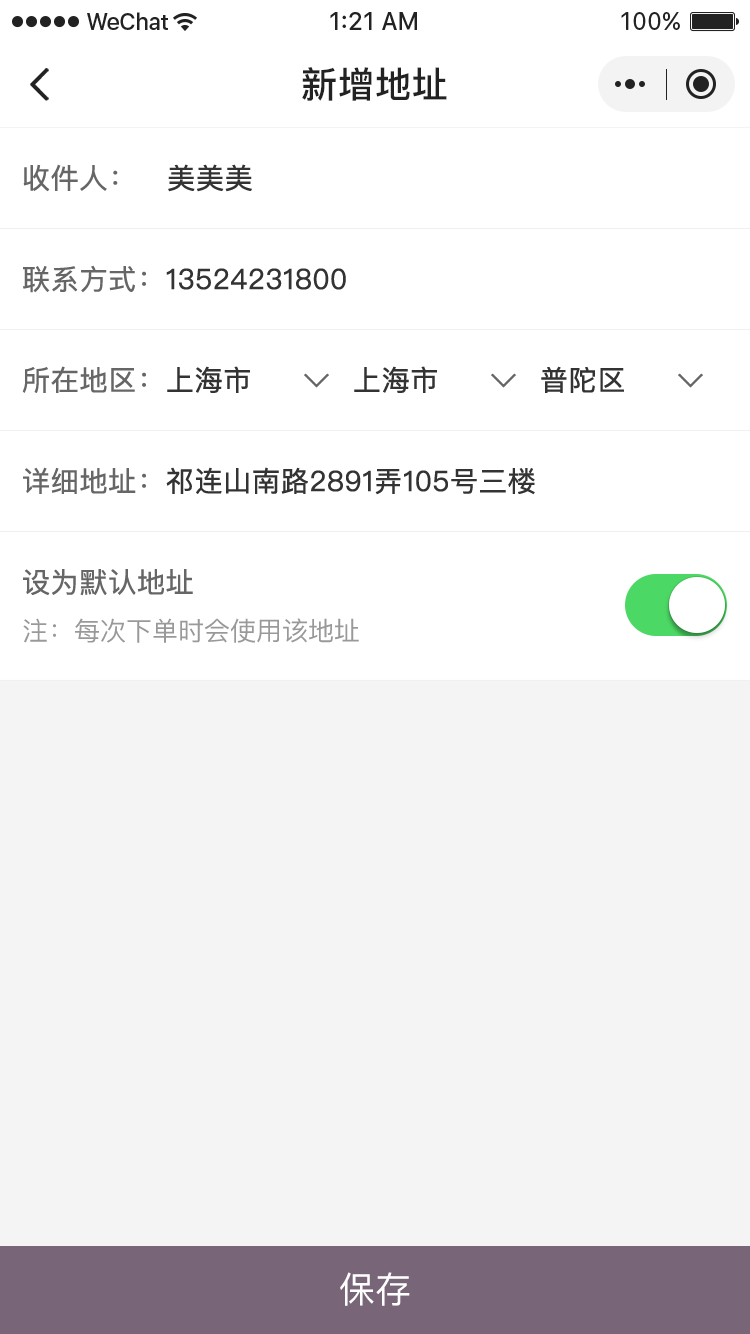
<style>
.page{position:relative;width:750px;height:1334px;background:#ffffff}
.page>*{position:absolute;margin:0}
.t1{font:36px "PingFang-SC-Bold";letter-spacing:0.028em;color:#222222}
.t2{font:28px "PingFangSC-Regular";color:#666666;font-weight:bold}
.t3{font:28px "PingFangSC-Regular";color:#333333;font-weight:bold}
.t4{font:26px "PingFangSC-Regular";color:#999999}
.t5{font:36px "PingFang-SC-Medium";color:#ffffff}
</style>
<div class="page">
<p class="t1" style="left:302px;top:67px;width:145px;height:34px">新增地址</p>
<p class="t2" style="left:23px;top:164px;width:229px;height:28px">收件人：   <span class="t3">美美美</span></p>
<p class="t3" style="left:23px;top:265px;width:323px;height:28px"><span class="t2">联系方式：</span>13524231800</p>
<p class="t3" style="left:22px;top:366px;width:602px;height:27px"><span class="t2">所在地区：</span>上海市          上海市          普陀区</p>
<p class="t3" style="left:23px;top:467px;width:512px;height:28px"><span class="t2">详细地址：</span>祁连山南路2891弄105号三楼</p>
<p class="t2" style="left:23px;top:569px;width:170px;height:27px">设为默认地址</p>
<p class="t4" style="left:23px;top:618px;width:336px;height:25px">注：每次下单时会使用该地址</p>
<p class="t5" style="left:340px;top:1272px;width:70px;height:34px">保存</p>
</div>
